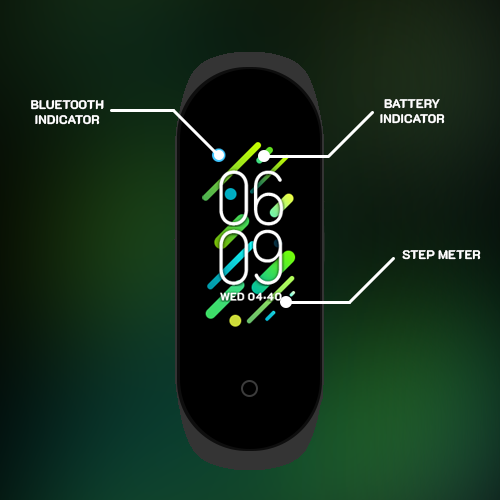
<style>
.page{position:relative;width:500px;height:500px}
.page>*{position:absolute;margin:0}
.t1{font:12.5px "K2D-ExtraBold";color:#ffffff}
</style>
<div class="page">
<p class="t1" style="left:31px;top:100px;width:73px;height:25px;text-align:center">BLUETOOTH<br>INDICATOR</p>
<p class="t1" style="left:380px;top:99px;width:65px;height:25px;text-align:center">BATTERY<br>INDICATOR</p>
<p class="t1" style="left:402px;top:250px;width:79px;height:10px">STEP METER</p>
</div>
